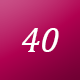
<style>
.page{position:relative;width:80px;height:80px}
.page>*{position:absolute;margin:0}
.t1{font:36px "Cambria-Italic";color:#ffffff}
</style>
<div class="page">
<p class="t1" style="left:21px;top:28px;width:38px;height:24px">40</p>
</div>
